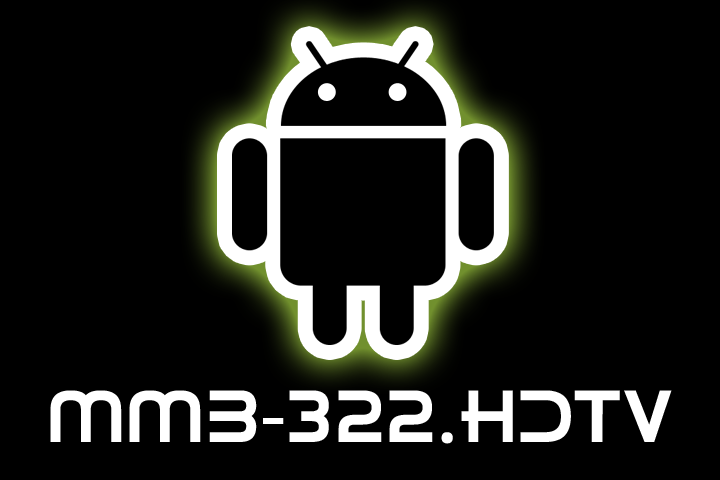
<style>
.page{position:relative;width:720px;height:480px;background:#000000}
.page>*{position:absolute;margin:0}
.t1{font:72px "DroidLogo";color:#ffffff}
</style>
<div class="page">
<p class="t1" style="left:50px;top:390px;width:622px;height:54px">MMB-322.HDTV</p>
</div>
